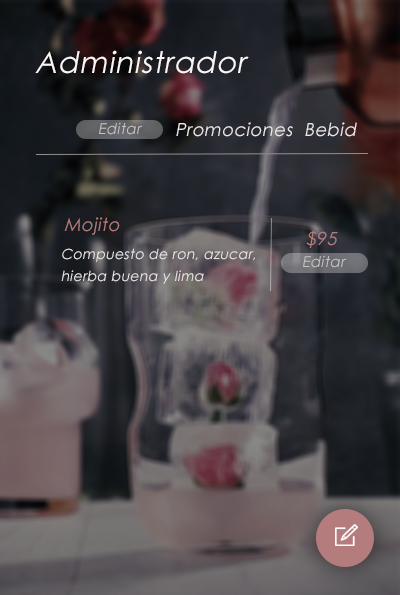
<style>
.page{position:relative;width:400px;height:595px}
.page>*{position:absolute;margin:0}
.t1{font:30px "CenturyGothic";letter-spacing:0.025em;color:#fbf7f7;font-style:italic}
.t2{font:15px "CenturyGothic";letter-spacing:0.025em;color:#c8c1c1;font-style:italic}
.t3{font:18px "CenturyGothic";letter-spacing:0.025em;color:#ece7e7;font-style:italic}
.t4{font:18px "CenturyGothic";letter-spacing:0.025em;color:#b47c7c;font-style:italic}
.t5{font:14px/11px "CenturyGothic";letter-spacing:0.025em;color:#ece7e7;font-style:italic}
</style>
<div class="page">
<p class="t1" style="left:35px;top:50px;width:214px;height:24px">Administrador</p>
<p class="t2" style="left:99px;top:122px;width:44px;height:13px">Editar</p>
<p class="t3" style="left:176px;top:122px;width:117px;height:15px">Promociones</p>
<p class="t3" style="left:305px;top:122px;width:52px;height:15px">Bebid</p>
<p class="t4" style="left:64px;top:217px;width:56px;height:18px">Mojito</p>
<p class="t4" style="left:306px;top:230px;width:32px;height:18px">$95</p>
<p class="t5" style="left:61px;top:248px;width:194px;height:36px;text-align:justify">Compuesto de ron, azucar, <br><br>hierba buena y lima</p>
<p class="t2" style="left:303px;top:255px;width:44px;height:13px">Editar</p>
</div>
